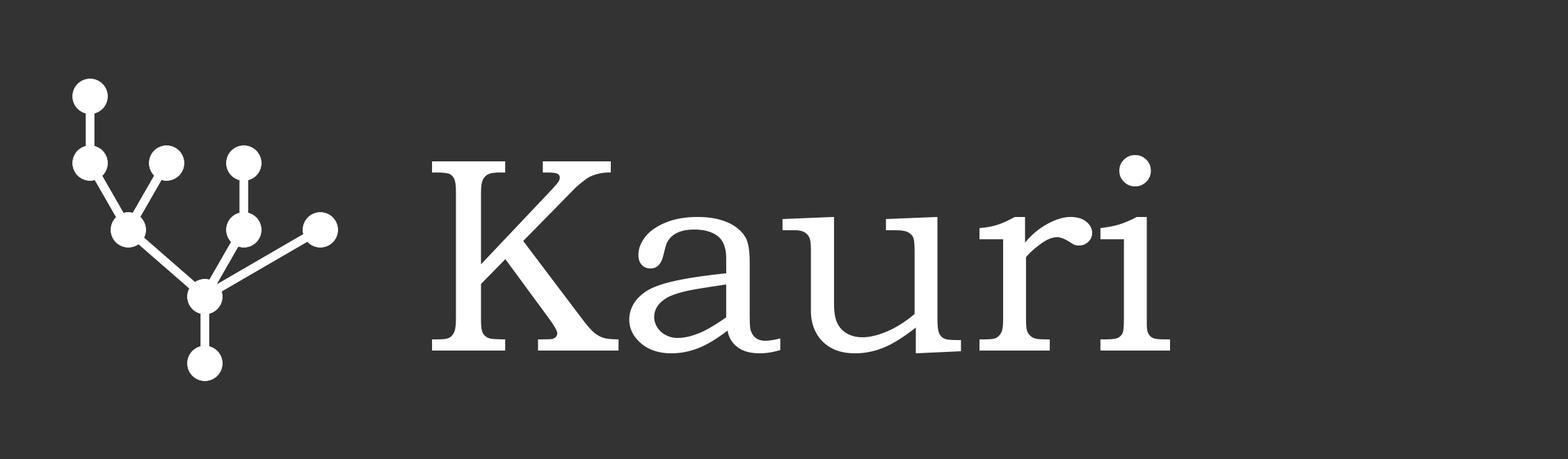
<style>
.page{position:relative;width:1568px;height:459px;background:#333333}
.page>*{position:absolute;margin:0}
.t1{font:278.3px "BookmanOldStyle";color:#ffffff}
</style>
<div class="page">
<p class="t1" style="left:432px;top:155px;width:738px;height:198px">Kauri</p>
</div>
